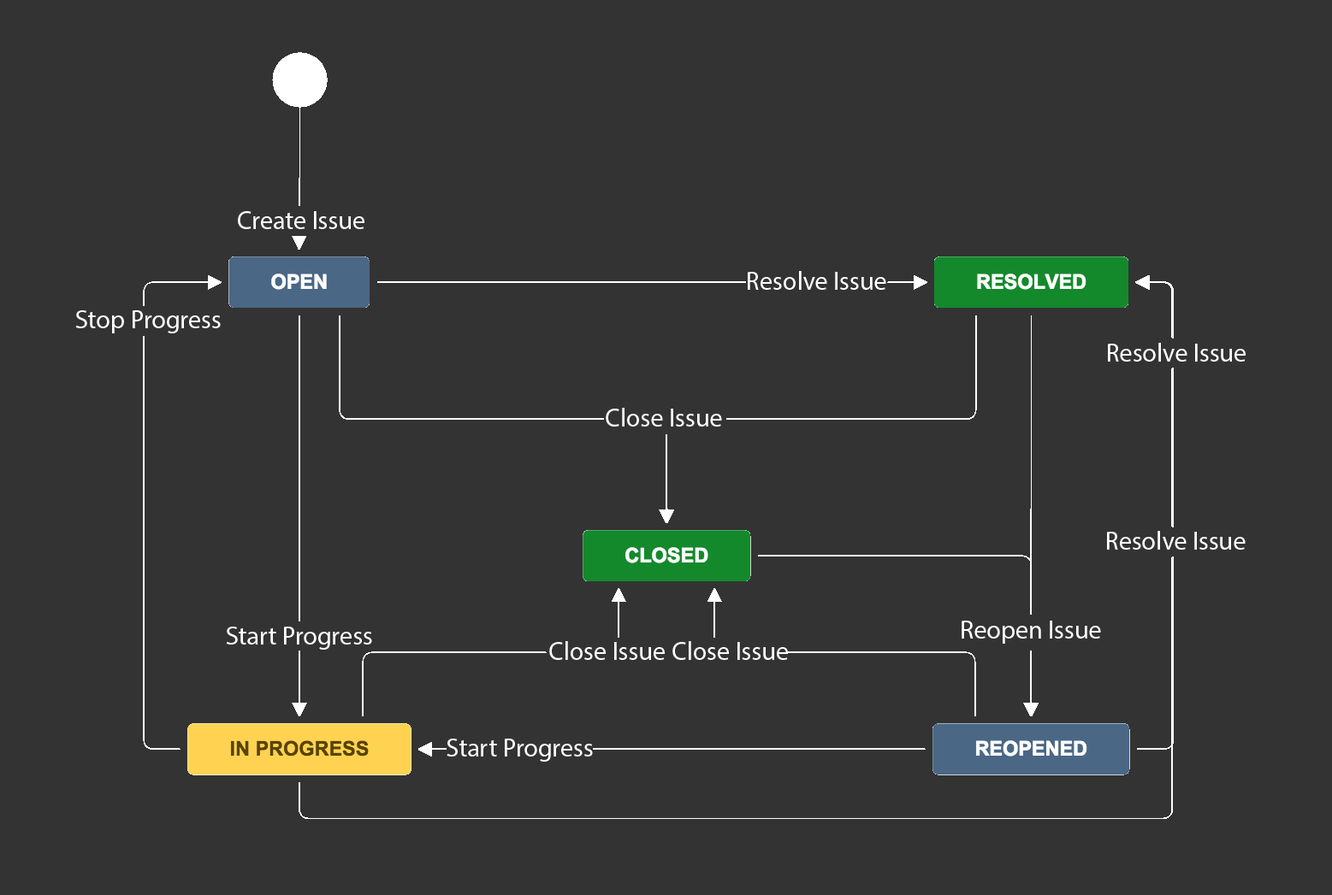
<style>
.page{position:relative;width:1332px;height:895px;background:#333333}
.page>*{position:absolute;margin:0}
.t1{font:25.7px "MyriadPro-Regular";color:#ffffff}
</style>
<div class="page">
<p class="t1" style="left:238px;top:211px;width:126px;height:18px">Create Issue</p>
<p class="t1" style="left:747px;top:271px;width:139px;height:19px">Resolve Issue</p>
<p class="t1" style="left:75px;top:310px;width:146px;height:24px">Stop Progress</p>
<p class="t1" style="left:1108px;top:343px;width:137px;height:19px">Resolve Issue</p>
<p class="t1" style="left:606px;top:408px;width:116px;height:19px">Close Issue</p>
<p class="t1" style="left:1107px;top:531px;width:138px;height:19px">Resolve Issue</p>
<p class="t1" style="left:226px;top:627px;width:146px;height:23px">Start Progress</p>
<p class="t1" style="left:961px;top:621px;width:140px;height:23px">Reopen Issue</p>
<p class="t1" style="left:549px;top:641px;width:116px;height:19px">Close Issue</p>
<p class="t1" style="left:672px;top:641px;width:116px;height:19px">Close Issue</p>
<p class="t1" style="left:446px;top:739px;width:147px;height:23px">Start Progress</p>
</div>
